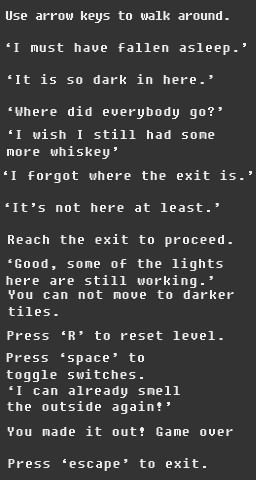
<style>
.page{position:relative;width:256px;height:480px;background:#333333}
.page>*{position:absolute;margin:0}
.t1{font:12px "Fixedsys";color:#ebebeb}
.t2{font:14px "Fixedsys";color:#ebebeb}
</style>
<div class="page">
<p class="t1" style="left:5px;top:11px;width:224px;height:12px">Use arrow keys to walk around.</p>
<p class="t2" style="left:6px;top:43px;width:240px;height:12px">‘I must have fallen asleep.’</p>
<p class="t2" style="left:8px;top:74px;width:205px;height:10px">‘It is so dark in here.’</p>
<p class="t2" style="left:8px;top:106px;width:214px;height:13px">‘Where did everybody go?’</p>
<p class="t2" style="left:7px;top:129px;width:208px;height:30px">‘I wish I still had some<br>more whiskey’</p>
<p class="t2" style="left:4px;top:170px;width:248px;height:13px">‘I forgot where the exit is.’</p>
<p class="t2" style="left:5px;top:203px;width:214px;height:9px">‘It’s not here at least.’</p>
<p class="t2" style="left:8px;top:234px;width:224px;height:13px">Reach the exit to proceed.</p>
<p class="t2" style="left:6px;top:258px;width:217px;height:30px">‘Good, some of the lights<br>here are still working.’</p>
<p class="t2" style="left:8px;top:290px;width:226px;height:26px">You can not move to darker<br>tiles.</p>
<p class="t2" style="left:7px;top:331px;width:216px;height:9px">Press ‘R’ to reset level.</p>
<p class="t2" style="left:6px;top:353px;width:138px;height:29px">Press ‘space’ to<br>toggle switches.</p>
<p class="t2" style="left:7px;top:386px;width:173px;height:28px">‘I can already smell<br>the outside again!’</p>
<p class="t2" style="left:7px;top:426px;width:226px;height:10px">You made it out! Game over</p>
<p class="t2" style="left:8px;top:458px;width:198px;height:13px">Press ‘escape’ to exit.</p>
</div>
